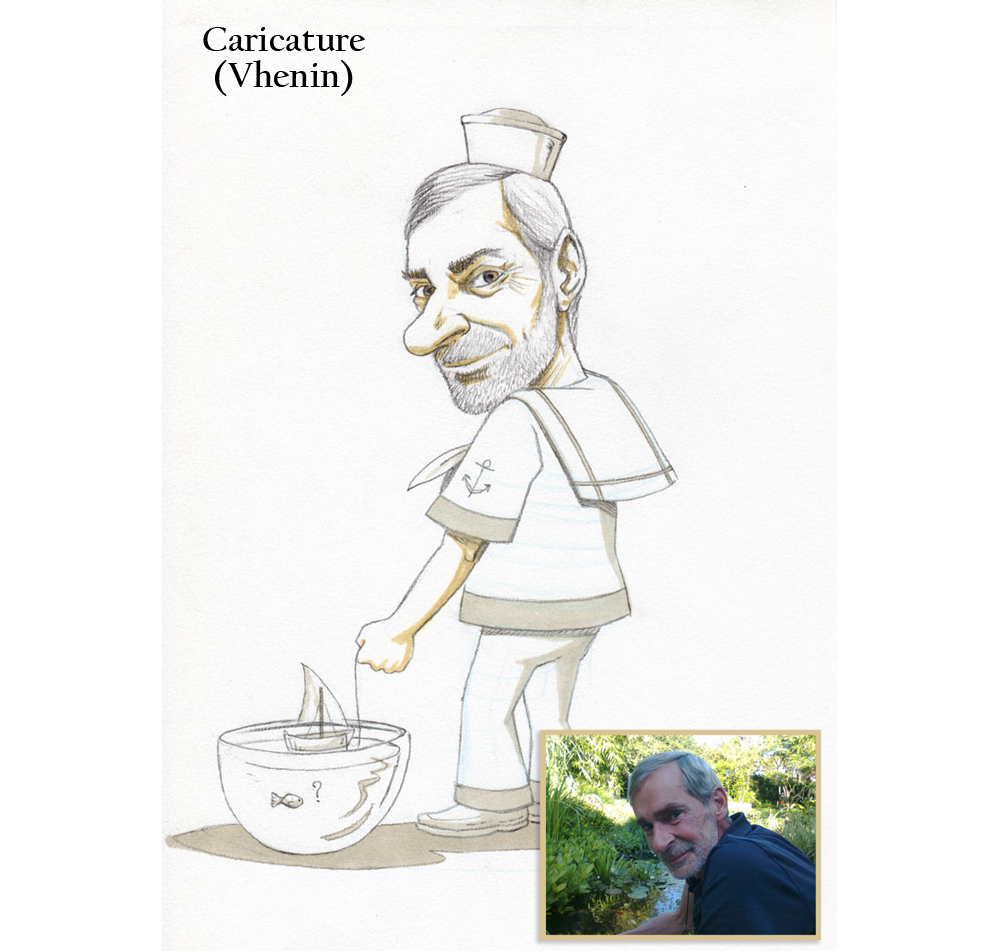
<style>
.page{position:relative;width:1000px;height:952px;background:#ffffff}
.page>*{position:absolute;margin:0}
.t1{font:36px/36px "CalifornianFB-Bold";color:#000000}
</style>
<div class="page">
<p class="t1" style="left:203px;top:27px;width:162px;height:69px;text-align:center">Caricature<br>(Vhenin)</p>
</div>
